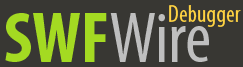
<style>
.page{position:relative;width:243px;height:67px;background:#383733}
.page>*{position:absolute;margin:0}
.t1{font:24px "MyriadPro-Cond";color:#ffd342}
.t2{font:72px "MyriadPro-Cond";color:#bfbfbf}
.t3{font:72px "MyriadPro-BoldCond";color:#a4da22}
</style>
<div class="page">
<p class="t1" style="left:169px;top:5px;width:72px;height:22px">Debugger</p>
<p class="t2" style="left:5px;top:13px;width:204px;height:49px"><span class="t3">SWF</span>Wire</p>
</div>
